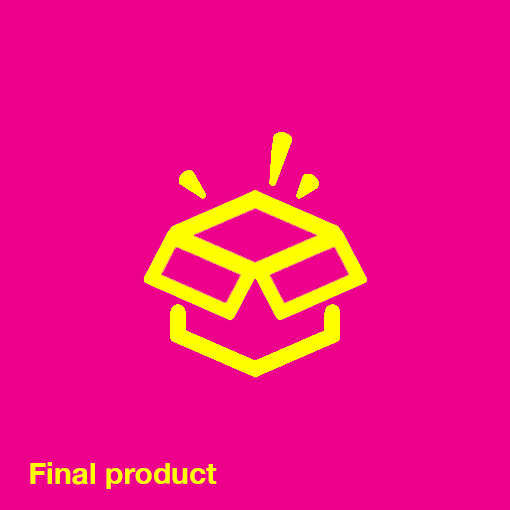
<style>
.page{position:relative;width:510px;height:510px;background:#ed008c}
.page>*{position:absolute;margin:0}
.t1{font:30px "HelveticaNeue-Bold";color:#ffff00}
</style>
<div class="page">
<p class="t1" style="left:30px;top:462px;width:187px;height:27px">Final product</p>
</div>
